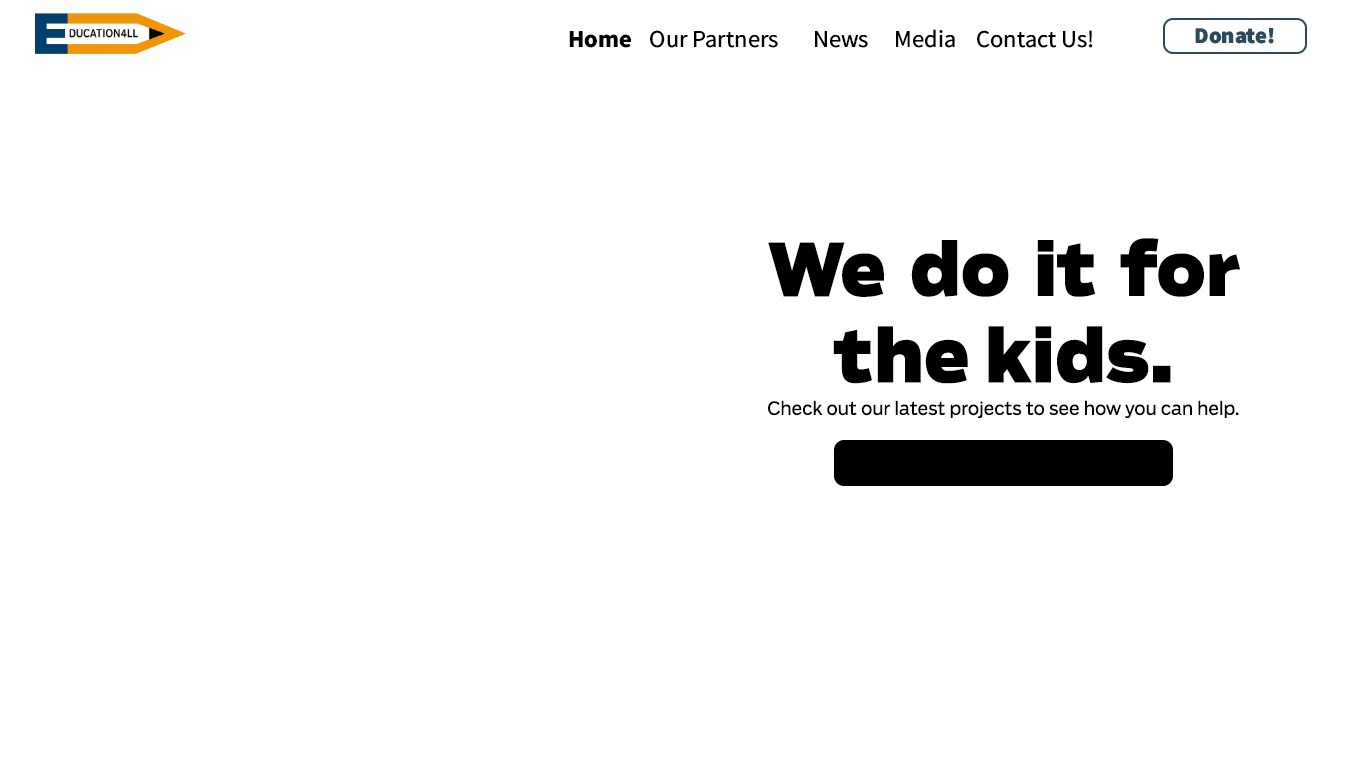
<style>
.page{position:relative;width:1366px;height:768px;background:#ffffff}
.page>*{position:absolute;margin:0}
.t1{font:24.3px "SourceSansRoman-Regular";color:#000000}
.t2{font:24.3px "SourceSansRoman-Bold";color:#000000}
.t3{font:22.5px "SourceSansRoman-Black";color:#2b4a5c}
.t4{font:72px "Boomer-Black";color:#000000}
.t5{font:18px "Boomer-Book";color:#000000}
</style>
<div class="page">
<p class="t1" style="left:569px;top:29px;width:524px;height:19px"><span class="t2">Home</span> Our Partners  News Media Contact Us!</p>
<p class="t3" style="left:1195px;top:28px;width:79px;height:16px">Donate!</p>
<p class="t4" style="left:768px;top:238px;width:472px;height:146px;text-align:justify">We do it for the kids.</p>
<p class="t5" style="left:768px;top:400px;width:471px;height:19px">Check out our latest projects to see how you can help.</p>
</div>
